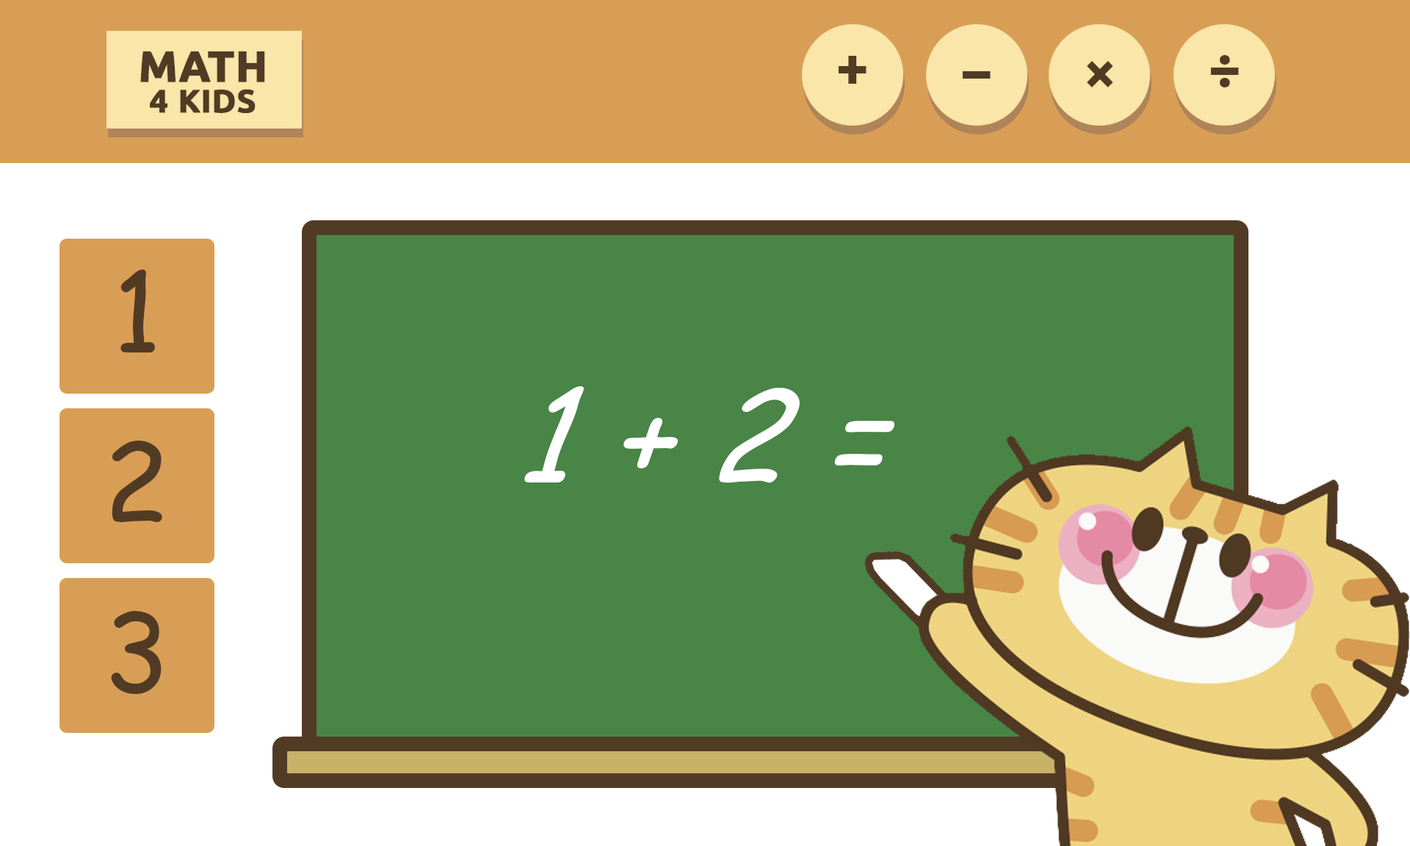
<style>
.page{position:relative;width:1410px;height:846px;background:#488546}
.page>*{position:absolute;margin:0}
.t1{font:43.3px "Ubuntu-Bold";color:#523b25;font-weight:bold}
.t2{font:58.7px "Ubuntu-Bold";color:#523b25}
.t3{font:32.5px "Ubuntu-Bold";color:#523b25;font-weight:bold}
.t4{font:108.7px "ComicSansMS";color:#523b25}
.t5{font:126.3px "ComicSansMS-Italic";color:#ffffff;font-style:italic}
</style>
<div class="page">
<p class="t1" style="left:140px;top:51px;width:125px;height:31px">MATH</p>
<p class="t2" style="left:838px;top:56px;width:28px;height:28px">+</p>
<p class="t2" style="left:1087px;top:61px;width:26px;height:26px">×</p>
<p class="t2" style="left:1210px;top:55px;width:29px;height:32px">÷</p>
<p class="t2" style="left:962px;top:71px;width:28px;height:8px">−</p>
<p class="t3" style="left:150px;top:89px;width:106px;height:24px">4 KIDS</p>
<p class="t4" style="left:120px;top:269px;width:35px;height:83px">1</p>
<p class="t5" style="left:524px;top:386px;width:370px;height:97px">1 + 2 =</p>
<p class="t4" style="left:112px;top:441px;width:50px;height:81px">2</p>
<p class="t4" style="left:111px;top:611px;width:51px;height:83px">3</p>
</div>
